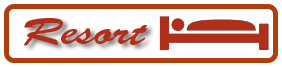
<style>
.page{position:relative;width:282px;height:67px;background:#ffffff}
.page>*{position:absolute;margin:0}
.t1{font:37.5px "BrushScriptStd";color:#b02f1a;scale:1.28 1}
</style>
<div class="page">
<p class="t1" style="left:24px;top:18px;width:124px;height:28px">Resort</p>
</div>
